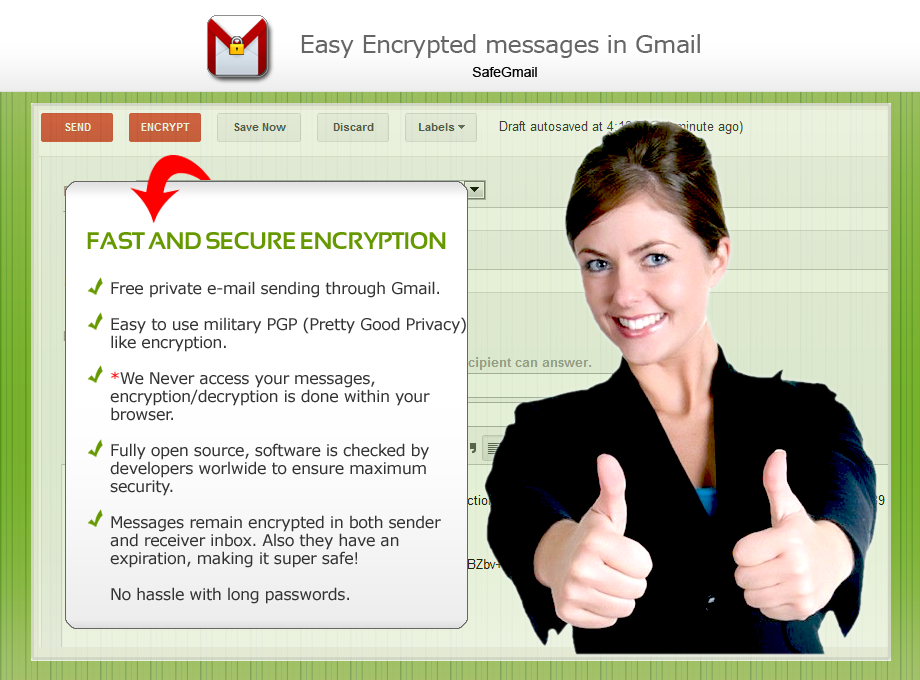
<style>
.page{position:relative;width:920px;height:680px}
.page>*{position:absolute;margin:0}
.t1{font:24px "Verdana";letter-spacing:-0.025em;color:#666666}
.t2{font:14px "ArialMT";color:#000000}
.t3{font:24px "Sansation-Bold";letter-spacing:-0.025em;color:#669900}
.t4{font:16px/18px "Verdana";letter-spacing:-0.025em;color:#333333}
.t5{font:16px/18px "Verdana";letter-spacing:-0.025em;color:#ff0000}
</style>
<div class="page">
<p class="t1" style="left:301px;top:34px;width:399px;height:24px">Easy Encrypted messages in Gmail</p>
<p class="t2" style="left:472px;top:67px;width:65px;height:10px">SafeGmail</p>
<p class="t3" style="left:87px;top:232px;width:359px;height:17px">FAST AND SECURE ENCRYPTION</p>
<p class="t4" style="left:110px;top:281px;width:356px;height:323px">Free private e-mail sending through Gmail. <br><br>Easy to use military PGP (Pretty Good Privacy) like encryption.<br><br><span class="t5">*</span>We Never access your messages, encryption/decryption is done within your browser. <br><br>Fully open source, software is checked by developers worlwide to ensure maximum security.                       Messages remain encrypted in both sender and receiver inbox. Also they have an expiration, making it super safe!<br><br>No hassle with long passwords.</p>
</div>
